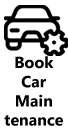
<style>
.page{position:relative;width:68px;height:131px;background:#ffffff}
.page>*{position:absolute;margin:0}
.t1{font:16px "MicrosoftTaiLe-Bold";color:#000000}
</style>
<div class="page">
<p class="t1" style="left:4px;top:56px;width:59px;height:70px;text-align:center">Book<br>Car<br>Main<br>tenance</p>
</div>
